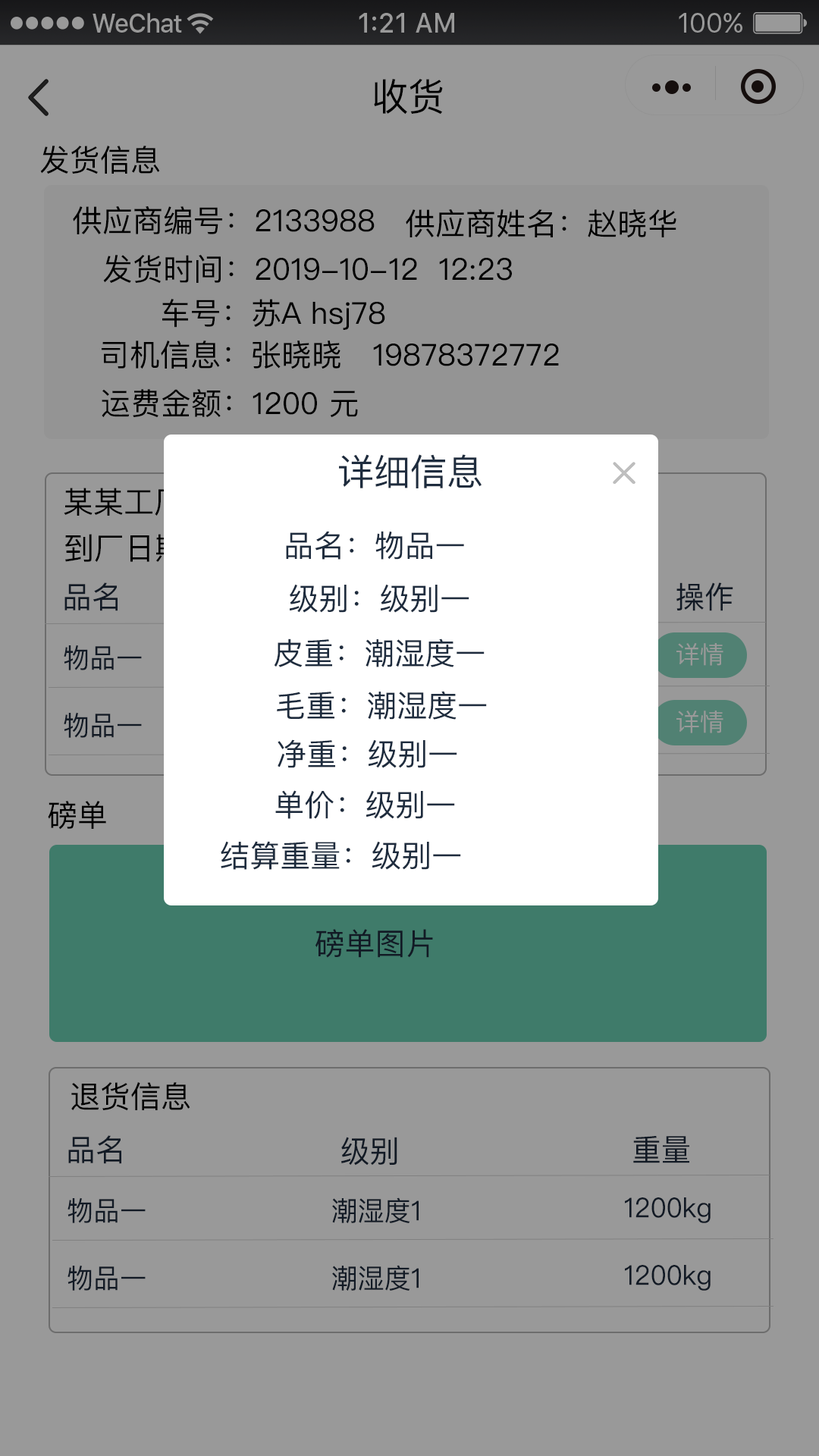
<style>
.page{position:relative;width:819px;height:1456px;background:#999999}
.page>*{position:absolute;margin:0}
.t1{font:37.9px "PingFangSC-Regular";color:#000000}
.t2{font:30.3px "PingFangSC-Regular";color:#000000}
.t3{font:36.4px "PingFangSC-Regular";color:#1e2c3e}
.t4{font:30.3px "PingFangSC-Regular";color:#1e2c3e}
.t5{font:30.3px "PingFangSC-Regular";color:#121a25}
.t6{font:27.3px "PingFangSC-Regular";color:#121a25}
.t7{font:24.3px "PingFangSC-Regular";color:#999999}
</style>
<div class="page">
<p class="t1" style="left:374px;top:79px;width:69px;height:36px">收货</p>
<p class="t2" style="left:40px;top:146px;width:120px;height:28px">发货信息</p>
<p class="t2" style="left:73px;top:206px;width:302px;height:28px">供应商编号：2133988</p>
<p class="t2" style="left:406px;top:209px;width:270px;height:29px">供应商姓名：赵晓华</p>
<p class="t2" style="left:103px;top:255px;width:409px;height:29px">发货时间：2019-10-12  12:23</p>
<p class="t2" style="left:162px;top:299px;width:223px;height:31px">车号：苏A hsj78</p>
<p class="t2" style="left:102px;top:340px;width:457px;height:29px">司机信息：张晓晓  19878372772</p>
<p class="t2" style="left:102px;top:389px;width:256px;height:29px">运费金额：1200 元</p>
<p class="t3" style="left:339px;top:454px;width:143px;height:34px">详细信息</p>
<p class="t4" style="left:286px;top:531px;width:178px;height:29px">品名：物品一</p>
<p class="t5" style="left:64px;top:582px;width:54px;height:29px">品名</p>
<p class="t4" style="left:289px;top:584px;width:180px;height:29px">级别：级别一</p>
<p class="t5" style="left:676px;top:582px;width:57px;height:29px">操作</p>
<p class="t4" style="left:274px;top:639px;width:211px;height:28px">皮重：潮湿度一</p>
<p class="t6" style="left:64px;top:645px;width:78px;height:25px">物品一</p>
<p class="t7" style="left:676px;top:643px;width:47px;height:23px">详情</p>
<p class="t4" style="left:277px;top:691px;width:210px;height:29px">毛重：潮湿度一</p>
<p class="t6" style="left:64px;top:712px;width:78px;height:26px">物品一</p>
<p class="t7" style="left:676px;top:711px;width:47px;height:22px">详情</p>
<p class="t4" style="left:278px;top:739px;width:179px;height:29px">净重：级别一</p>
<p class="t4" style="left:275px;top:790px;width:180px;height:29px">单价：级别一</p>
<p class="t2" style="left:48px;top:801px;width:58px;height:29px">磅单</p>
<p class="t4" style="left:221px;top:841px;width:240px;height:29px">结算重量：级别一</p>
<p class="t5" style="left:315px;top:929px;width:118px;height:29px">磅单图片</p>
<p class="t2" style="left:71px;top:1082px;width:119px;height:29px">退货信息</p>
<p class="t5" style="left:68px;top:1135px;width:53px;height:29px">品名</p>
<p class="t5" style="left:341px;top:1137px;width:56px;height:29px">级别</p>
<p class="t5" style="left:633px;top:1135px;width:56px;height:28px">重量</p>
<p class="t6" style="left:67px;top:1197px;width:79px;height:26px">物品一</p>
<p class="t6" style="left:332px;top:1197px;width:87px;height:26px">潮湿度1</p>
<p class="t6" style="left:625px;top:1197px;width:86px;height:26px">1200kg</p>
<p class="t6" style="left:67px;top:1265px;width:79px;height:26px">物品一</p>
<p class="t6" style="left:332px;top:1265px;width:87px;height:26px">潮湿度1</p>
<p class="t6" style="left:625px;top:1265px;width:86px;height:26px">1200kg</p>
</div>
